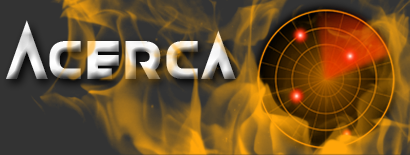
<style>
.page{position:relative;width:410px;height:155px}
.page>*{position:absolute;margin:0}
.t1{font:71.1px "Armwarmer"}
</style>
<div class="page">
<p class="t1" style="left:6px;top:20px;width:230px;height:59px">Acerca</p>
</div>
